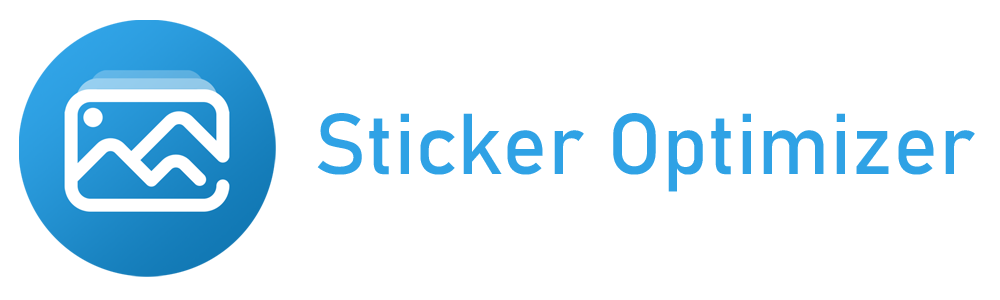
<style>
.page{position:relative;width:1000px;height:300px;background:#ffffff}
.page>*{position:absolute;margin:0}
.t1{font:85px "Bahnschrift";color:#2fa2e5}
</style>
<div class="page">
<p class="t1" style="left:317px;top:113px;width:658px;height:79px">Sticker Optimizer</p>
</div>
